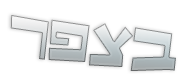
<style>
.page{position:relative;width:186px;height:84px;background:#ffffff}
.page>*{position:absolute;margin:0}
.t1{font:41.7px "BNCaptain"}
</style>
<div class="page">
<p class="t1" style="left:10px;top:15px;width:166px;height:56px;rotate:6deg">בצפר</p>
</div>
